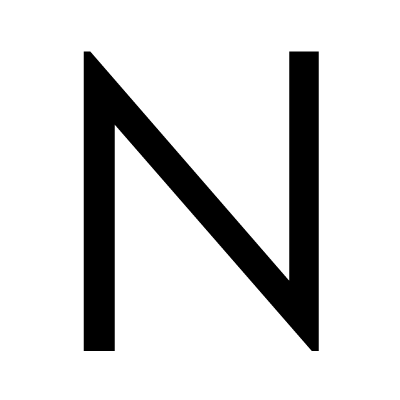
<style>
.page{position:relative;width:400px;height:400px;background:#ffffff}
.page>*{position:absolute;margin:0}
.t1{font:416.7px "CenturyGothic";color:#000000}
</style>
<div class="page">
<p class="t1" style="left:83px;top:51px;width:236px;height:300px">N</p>
</div>
